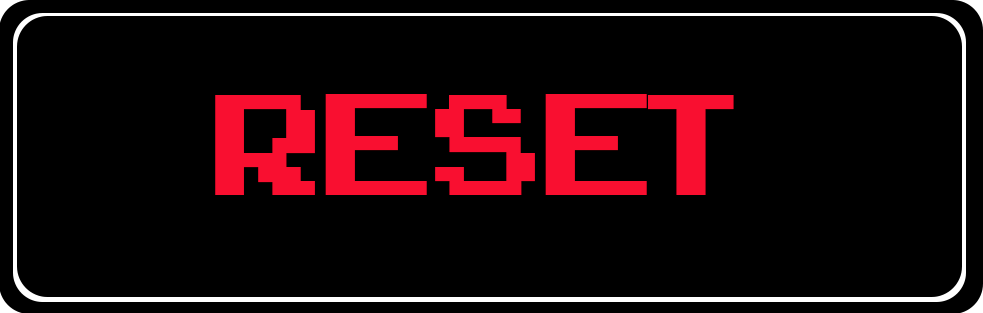
<style>
.page{position:relative;width:983px;height:313px;background:#000000}
.page>*{position:absolute;margin:0}
.t1{font:200px "ArcadeClassic";color:#f90f30}
</style>
<div class="page">
<p class="t1" style="left:215px;top:94px;width:519px;height:101px">RESET</p>
</div>
